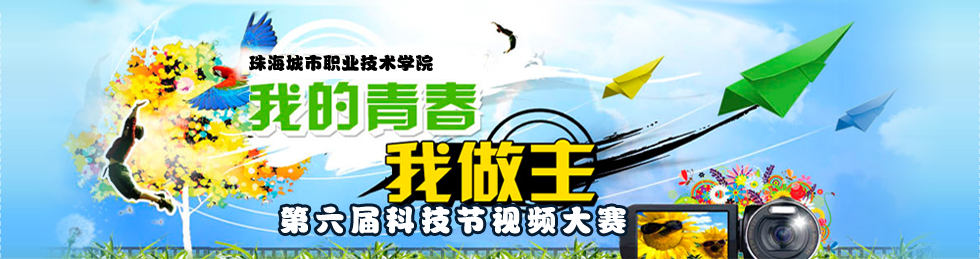
<style>
.page{position:relative;width:980px;height:259px}
.page>*{position:absolute;margin:0}
.t1{font:17.3px "FZPWJW--GB1-0";letter-spacing:0.05em;color:#010100}
.t2{font:28.9px "FZPWJW--GB1-0";letter-spacing:0.2em;color:#ffffff}
</style>
<div class="page">
<p class="t1" style="left:249px;top:54px;width:184px;height:17px">珠海城市职业技术学院</p>
<p class="t2" style="left:280px;top:206px;width:346px;height:28px">第六届科技节视频大赛</p>
</div>
